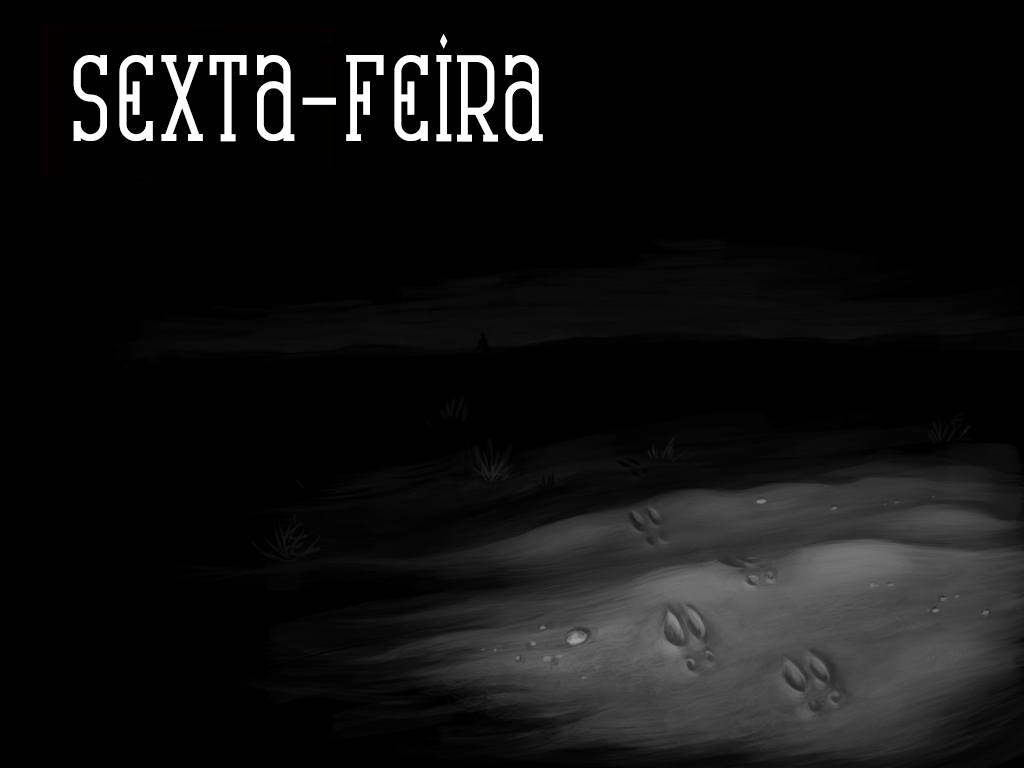
<style>
.page{position:relative;width:1024px;height:768px;background:#000000}
.page>*{position:absolute;margin:0}
.t1{font:132px "CatharsisRequiemBold";letter-spacing:-0.003em;color:#ffffff}
</style>
<div class="page">
<p class="t1" style="left:73px;top:34px;width:470px;height:108px">sexta-feira</p>
</div>
